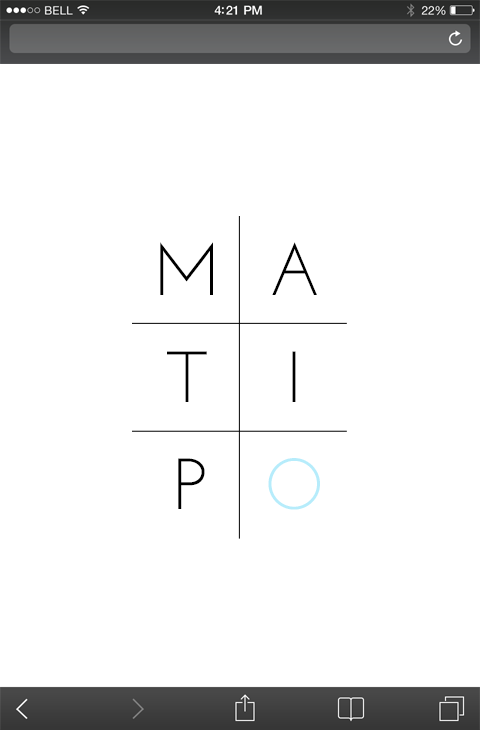
<style>
.page{position:relative;width:480px;height:730px;background:#ffffff}
.page>*{position:absolute;margin:0}
.t1{font:71.9px "JosefinSans";color:#000000}
.t2{font:71.9px "JosefinSans";color:#b6ecfb}
</style>
<div class="page">
<p class="t1" style="left:160px;top:242px;width:53px;height:53px">M</p>
<p class="t1" style="left:272px;top:242px;width:45px;height:53px">A</p>
<p class="t1" style="left:167px;top:351px;width:40px;height:51px">T</p>
<p class="t1" style="left:292px;top:351px;width:4px;height:51px">I</p>
<p class="t1" style="left:178px;top:458px;width:27px;height:51px">P</p>
<p class="t2" style="left:268px;top:458px;width:52px;height:52px">O</p>
</div>
